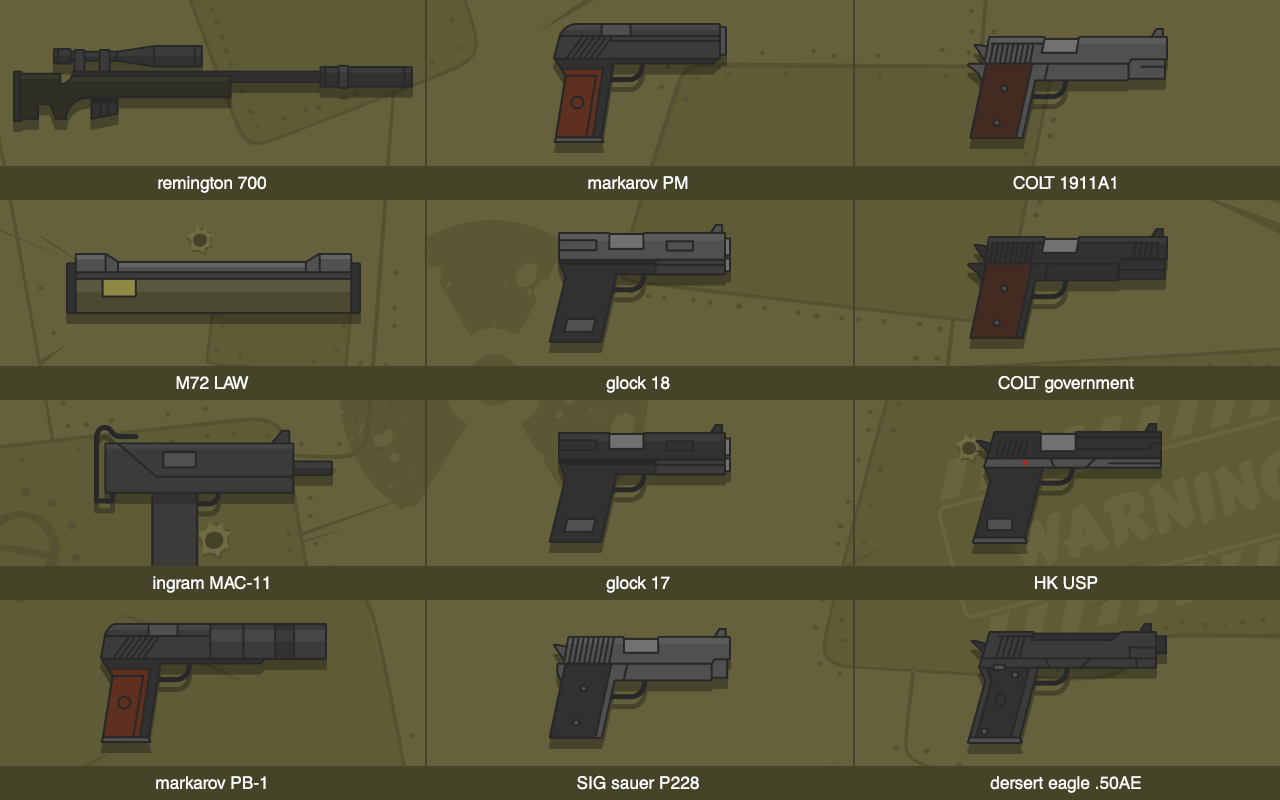
<style>
.page{position:relative;width:1280px;height:800px;background:#64613c}
.page>*{position:absolute;margin:0}
.t1{font:17.4px/200px "HelveticaCE-Regular";color:#ffffff}
</style>
<div class="page">
<p class="t1" style="left:153px;top:176px;width:116px;height:614px;text-align:center">remington 700<br>M72 LAW<br>ingram MAC-11<br>markarov PB-1</p>
<p class="t1" style="left:577px;top:176px;width:122px;height:614px;text-align:center">markarov PM<br>glock 18<br>glock 17<br>SIG sauer P228</p>
<p class="t1" style="left:990px;top:175px;width:151px;height:618px;text-align:center">COLT 1911A1<br>COLT government<br>HK USP<br>dersert eagle .50AE</p>
</div>
